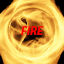
<style>
.page{position:relative;width:64px;height:64px}
.page>*{position:absolute;margin:0}
.t1{font:12px "MyriadPro-BoldIt";color:#ff0000}
</style>
<div class="page">
<p class="t1" style="left:21px;top:26px;width:23px;height:9px">FIRE</p>
</div>
